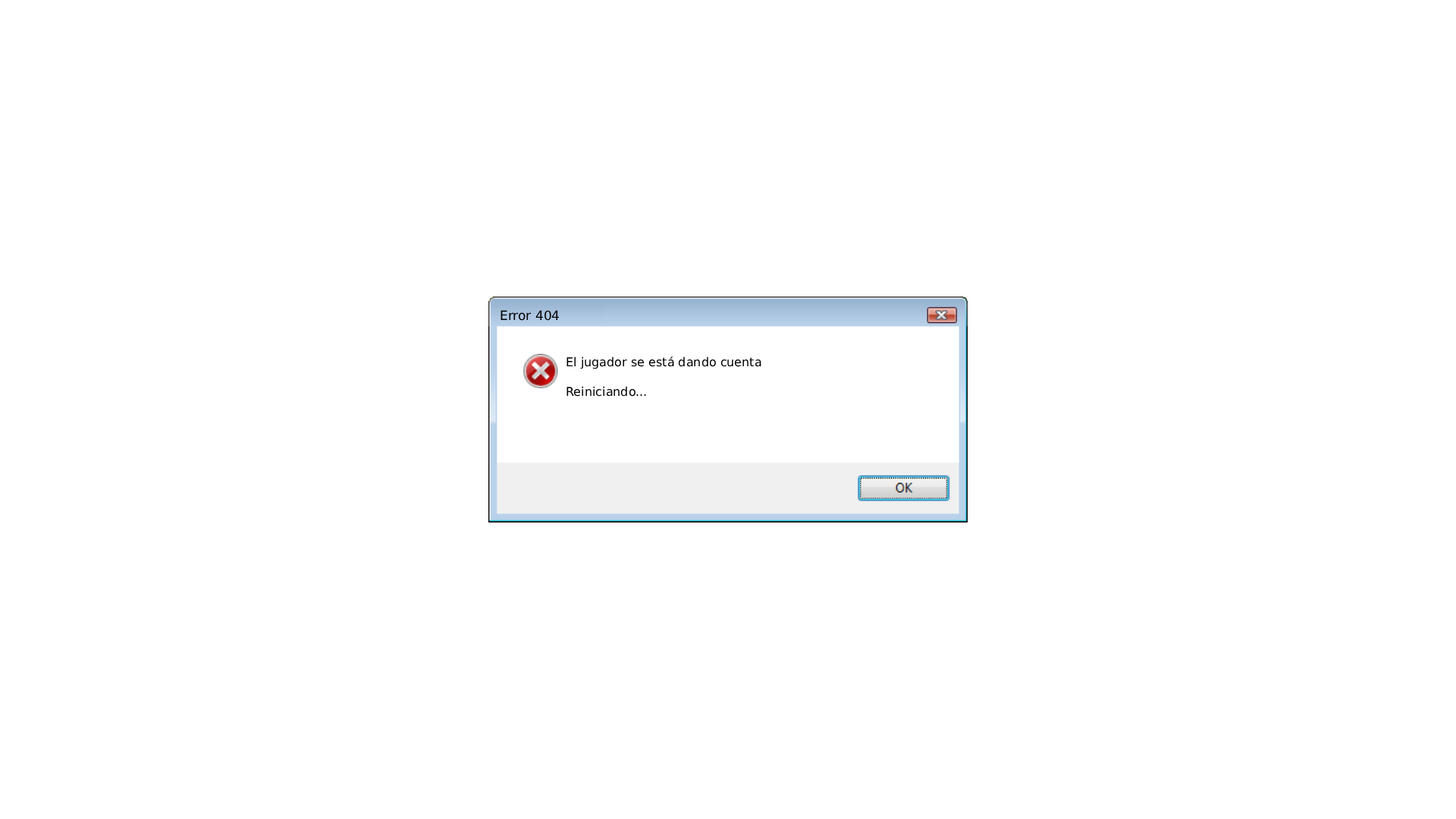
<style>
.page{position:relative;width:1456px;height:819px;background:#ffffff}
.page>*{position:absolute;margin:0}
.t1{font:12.9px "DejaVuSans";color:#000000}
.t2{font:12.1px "DejaVuSans";color:#000000}
</style>
<div class="page">
<p class="t1" style="left:500px;top:310px;width:59px;height:11px">Error 404</p>
<p class="t2" style="left:566px;top:356px;width:195px;height:41px">El jugador se está dando cuenta<br><br>Reiniciando...</p>
</div>
